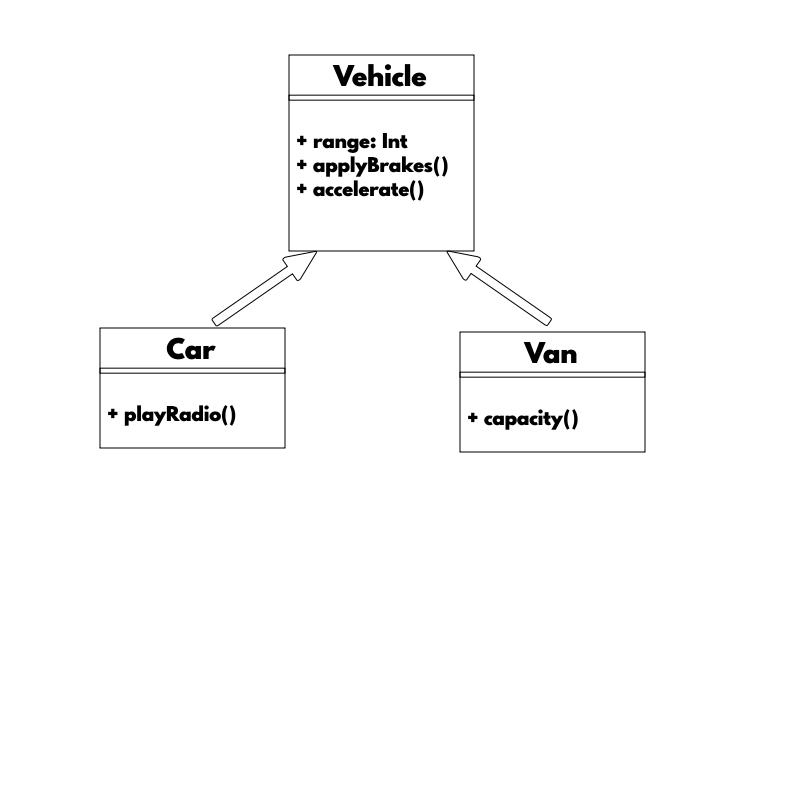
<style>
.page{position:relative;width:800px;height:800px;background:#ffffff}
.page>*{position:absolute;margin:0}
.t1{font:28px "SpartanMB-Black";color:#000000}
.t2{font:20px "SpartanMB-Black";color:#000000}
</style>
<div class="page">
<p class="t1" style="left:332px;top:64px;width:95px;height:23px">Vehicle</p>
<p class="t2" style="left:297px;top:133px;width:151px;height:68px">+ range: Int<br>+ applyBrakes()<br>+ accelerate()</p>
<p class="t1" style="left:166px;top:337px;width:50px;height:23px">Car</p>
<p class="t1" style="left:523px;top:342px;width:54px;height:22px">Van</p>
<p class="t2" style="left:108px;top:405px;width:128px;height:21px">+ playRadio()</p>
<p class="t2" style="left:468px;top:409px;width:110px;height:21px">+ capacity()</p>
</div>
